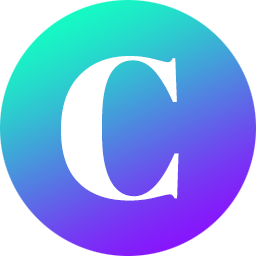
<style>
.page{position:relative;width:256px;height:256px;background:#ffffff}
.page>*{position:absolute;margin:0}
.t1{font:200px "AbrilFatface-Regular";letter-spacing:0.06em;color:#ffffff}
</style>
<div class="page">
<p class="t1" style="left:61px;top:56px;width:118px;height:145px">C</p>
</div>
